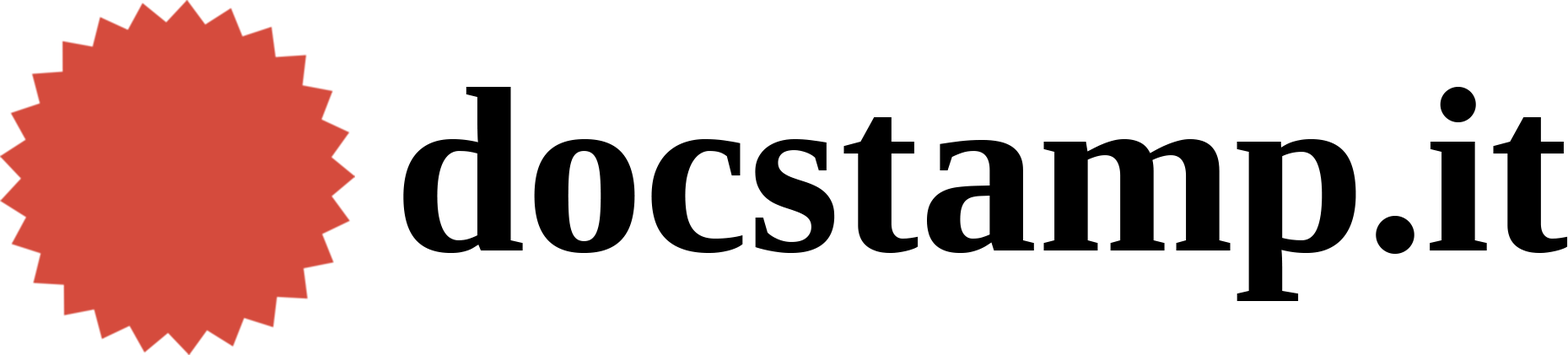
<style>
.page{position:relative;width:1568px;height:355px;background:#ffffff}
.page>*{position:absolute;margin:0}
.t1{font:236.2px "LiberationSerif-Bold";color:#000000}
</style>
<div class="page">
<p class="t1" style="left:403px;top:87px;width:1165px;height:214px">docstamp.it</p>
</div>
